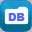
<style>
.page{position:relative;width:32px;height:32px}
.page>*{position:absolute;margin:0}
.t1{font:10.7px "Arial-Black";color:#5668ed}
</style>
<div class="page">
<p class="t1" style="left:8px;top:13px;width:17px;height:8px">DB</p>
</div>
